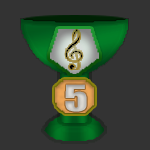
<style>
.page{position:relative;width:150px;height:150px;background:#333333}
.page>*{position:absolute;margin:0}
.t1{font:33.1px "Impact";color:#c4c2be;scale:1.35 1}
</style>
<div class="page">
<p class="t1" style="left:65px;top:84px;width:22px;height:28px">5</p>
</div>
